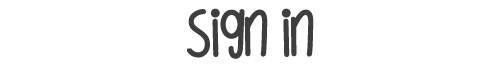
<style>
.page{position:relative;width:500px;height:70px;background:#ffffff}
.page>*{position:absolute;margin:0}
.t1{font:50px "cheesefoodies";color:#3e3e3e}
</style>
<div class="page">
<p class="t1" style="left:187px;top:8px;width:127px;height:51px">Sign in</p>
</div>
